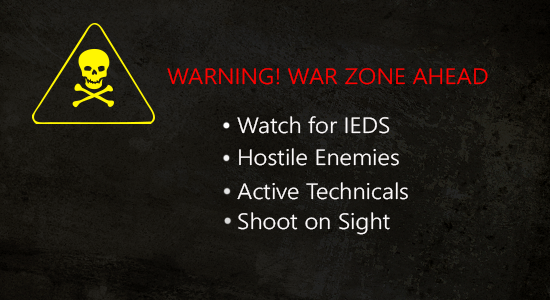
<style>
.page{position:relative;width:550px;height:300px}
.page>*{position:absolute;margin:0}
.t1{font:22.3px "SegoeUI-Semilight";color:#ff0000;scale:1.08 1}
.t2{font:22.3px "SegoeUI-Semilight";color:#fcf9f9;scale:1.08 1}
</style>
<div class="page">
<p class="t1" style="left:167px;top:68px;width:321px;height:17px">WARNING! WAR ZONE AHEAD</p>
<p class="t2" style="left:237px;top:116px;width:153px;height:18px">Watch for IEDS</p>
<p class="t2" style="left:239px;top:148px;width:160px;height:18px">Hostile Enemies</p>
<p class="t2" style="left:237px;top:182px;width:171px;height:18px">Active Technicals</p>
<p class="t2" style="left:238px;top:212px;width:152px;height:23px">Shoot on Sight</p>
</div>
